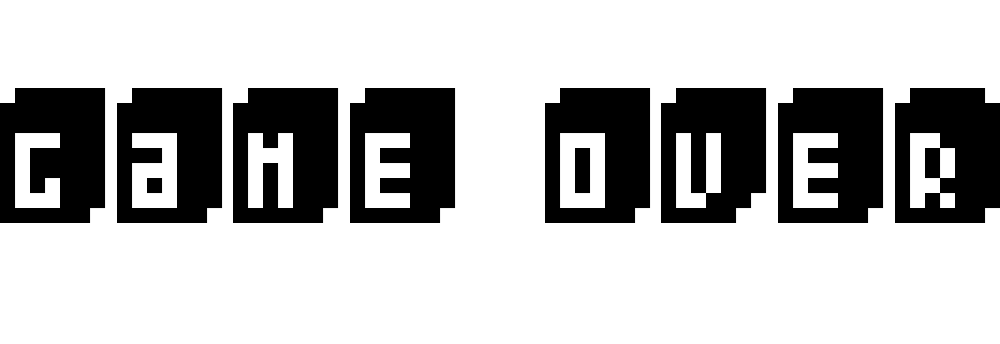
<style>
.page{position:relative;width:1000px;height:344px;background:#ffffff}
.page>*{position:absolute;margin:0}
.t1{font:240px "Pixeliza20";color:#000000}
</style>
<div class="page">
<p class="t1" style="left:0px;top:88px;width:1000px;height:135px">Game over</p>
</div>
